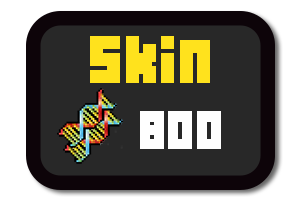
<style>
.page{position:relative;width:300px;height:200px;background:#282828}
.page>*{position:absolute;margin:0}
.t1{font:60px "04b19";letter-spacing:0.025em;color:#ffe21d}
.t2{font:48px "04b19";letter-spacing:0.025em;color:#ffffff}
</style>
<div class="page">
<p class="t1" style="left:90px;top:36px;width:120px;height:47px">skin</p>
<p class="t2" style="left:140px;top:111px;width:81px;height:38px">800</p>
</div>
